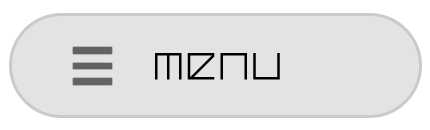
<style>
.page{position:relative;width:430px;height:130px;background:#e3e3e3}
.page>*{position:absolute;margin:0}
.t1{font:77px "AuricomRegular";letter-spacing:0.05em;color:#000000}
</style>
<div class="page">
<p class="t1" style="left:155px;top:53px;width:125px;height:27px">MENU</p>
</div>
